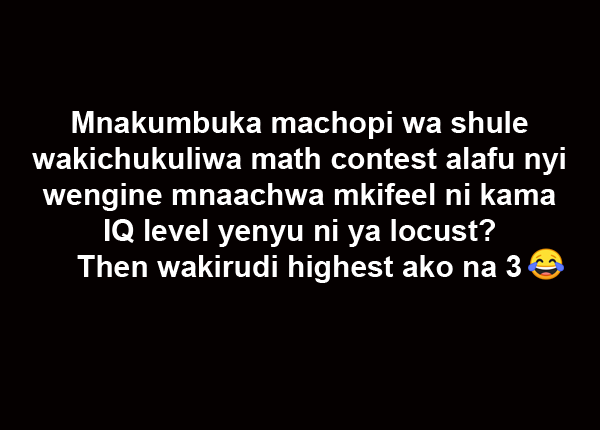
<style>
.page{position:relative;width:600px;height:430px;background:#050000}
.page>*{position:absolute;margin:0}
.t1{font:30px "Arial-BoldMT";color:#ffffff}
</style>
<div class="page">
<p class="t1" style="left:32px;top:111px;width:533px;height:172px;text-align:center">Mnakumbuka machopi wa shule <br>wakichukuliwa math contest alafu nyi wengine mnaachwa mkifeel ni kama <br>IQ level yenyu ni ya locust? <br>Then wakirudi highest ako na 3</p>
</div>
